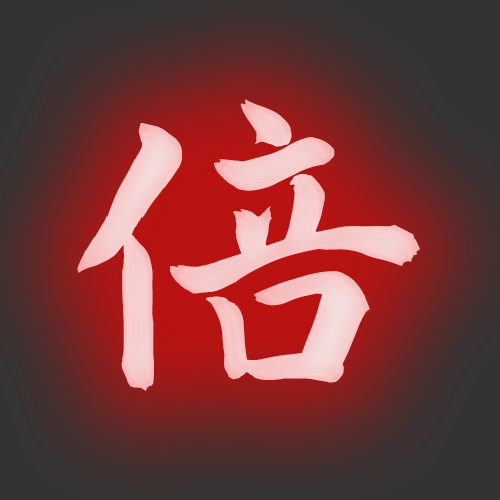
<style>
.page{position:relative;width:500px;height:500px}
.page>*{position:absolute;margin:0}
.t1{font:377.6px "nagayama_kai";color:#f6c9c9}
</style>
<div class="page">
<p class="t1" style="left:77px;top:99px;width:343px;height:293px">倍</p>
</div>
